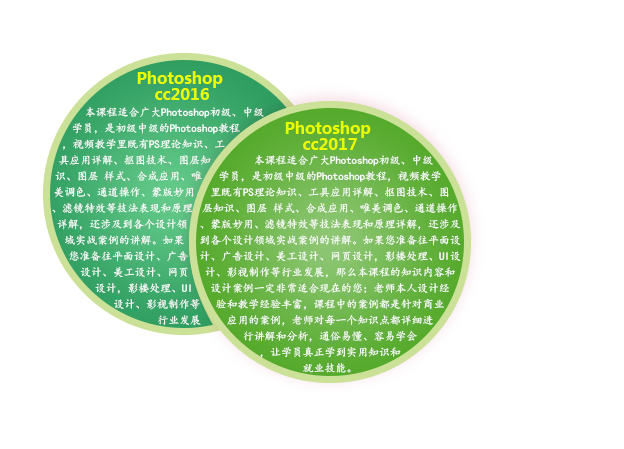
<style>
.page{position:relative;width:624px;height:449px;background:#ffffff}
.page>*{position:absolute;margin:0}
.t1{font:16px/16px "MicrosoftYaHei-Bold";letter-spacing:-0.01em;color:#eaff00}
.t2{font:11px/16px "KaiTi";letter-spacing:-0.01em;color:#ffffff}
</style>
<div class="page">
<p class="t1" style="left:137px;top:71px;width:86px;height:29px;text-align:center">Photoshop <br>cc2016</p>
<p class="t2" style="left:52px;top:107px;width:212px;height:219px;text-align:center">本课程适合广大Photoshop初级、中级学员，是初级中级的Photoshop教程，视频教学里既有PS理论知识、工具应用详解、抠图技术、图层知识、图层 样式、合成应用、唯美调色、通道操作、蒙版妙用、滤镜特效等技法表现和原理详解，还涉及到各个设计领域实战案例的讲解。如果您准备往平面设计、广告设计、美工设计、网页设计，影楼处理、UI设计、影视制作等行业发展</p>
<p class="t1" style="left:285px;top:121px;width:86px;height:29px;text-align:center">Photoshop <br>cc2017</p>
<p class="t2" style="left:200px;top:155px;width:261px;height:218px;text-align:center">本课程适合广大Photoshop初级、中级学员，是初级中级的Photoshop教程，视频教学里既有PS理论知识、工具应用详解、抠图技术、图层知识、图层 样式、合成应用、唯美调色、通道操作、蒙版妙用、滤镜特效等技法表现和原理详解，还涉及到各个设计领域实战案例的讲解。如果您准备往平面设计、广告设计、美工设计、网页设计，影楼处理、UI设计、影视制作等行业发展，那么本课程的知识内容和设计案例一定非常适合现在的您；老师本人设计经验和教学经验丰富，课程中的案例都是针对商业应用的案例，老师对每一个知识点都详细进行讲解和分析，通俗易懂、容易学会，让学员真正学到实用知识和就业技能。</p>
</div>
